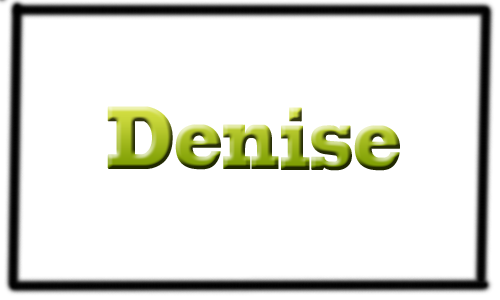
<style>
.page{position:relative;width:500px;height:300px;background:#ffffff}
.page>*{position:absolute;margin:0}
.t1{font:83.3px "BlackoakStd";scale:0.44 1}
</style>
<div class="page">
<p class="t1" style="left:107px;top:106px;width:293px;height:65px">Denise</p>
</div>
